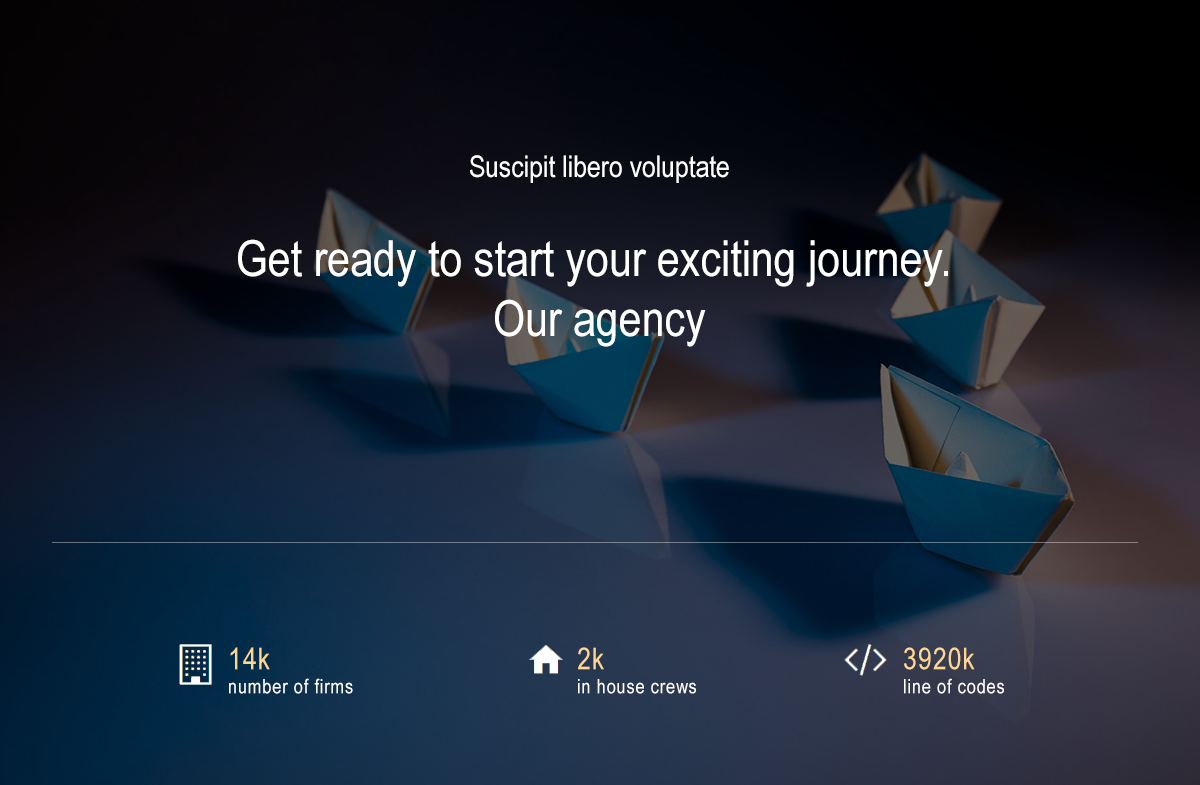
<style>
.page{position:relative;width:1200px;height:785px}
.page>*{position:absolute;margin:0}
.t1{font:50px "ArialNarrow";color:#ffffff}
.t2{font:30px "ArialNarrow";color:#ffffff}
.t3{font:20px "ArialNarrow";letter-spacing:0.04em;color:#ffffff}
.t4{font:30px "ArialNarrow";letter-spacing:0.04em;color:#ffd692}
</style>
<div class="page">
<p class="t1" style="left:238px;top:155px;width:710px;height:192px;text-align:center"><span class="t2">Suscipit libero voluptate<br><br></span>Get ready to start your exciting journey. <br>Our agency</p>
<p class="t3" style="left:229px;top:647px;width:124px;height:47px"><span class="t4">14k<br></span>number of firms</p>
<p class="t3" style="left:578px;top:647px;width:118px;height:47px"><span class="t4">2k<br></span>in house crews</p>
<p class="t3" style="left:904px;top:647px;width:100px;height:47px"><span class="t4">3920k<br></span>line of codes</p>
</div>
